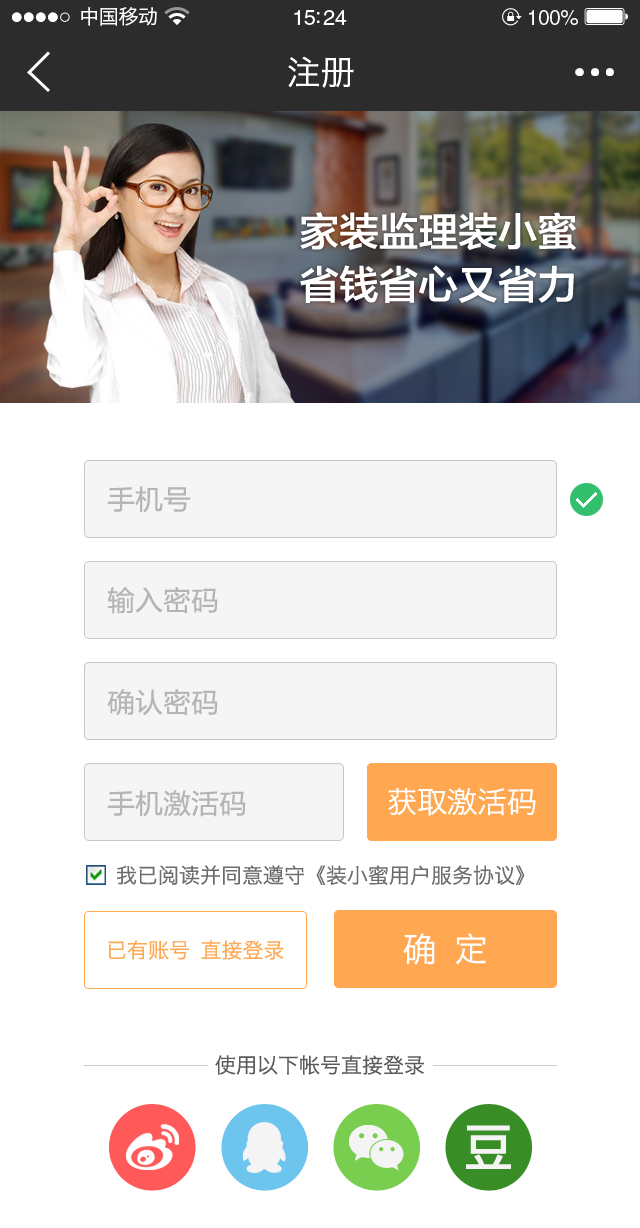
<style>
.page{position:relative;width:640px;height:1228px;background:#ffffff}
.page>*{position:absolute;margin:0}
.t1{font:20px "HiraginoSansGB-W3";letter-spacing:-0.02em;color:#ffffff}
.t2{font:21.5px "HelveticaLTStd-Roman";letter-spacing:-0.02em;color:#ffffff}
.t3{font:20.6px "HelveticaLTStd-Roman";letter-spacing:-0.02em;color:#ffffff}
.t4{font:34px "HiraginoSansGB-W3";color:#ffffff}
.t5{font:39.7px/52.9px "FZLTZHK--GBK1-0";color:#ffffff}
.t6{font:28px "FZLTHJW--GB1-0";color:#b5b5b5}
.t7{font:30px "HiraginoSansGB-W3";color:#ffffff}
.t8{font:21px "HiraginoSansGB-W3";color:#6c6c6c}
.t9{font:21px "HiraginoSansGB-W3";color:#ffa751}
.t10{font:21px "HiraginoSansGB-W3";color:#5b5b5b}
</style>
<div class="page">
<p class="t1" style="left:81px;top:7px;width:76px;height:19px">中国移动</p>
<p class="t2" style="left:294px;top:10px;width:53px;height:15px">15:24</p>
<p class="t3" style="left:529px;top:10px;width:49px;height:15px">100%</p>
<p class="t4" style="left:288px;top:56px;width:66px;height:32px">注册</p>
<p class="t5" style="left:300px;top:212px;width:277px;height:91px">家装监理装小蜜<br>省钱省心又省力</p>
<p class="t6" style="left:107px;top:486px;width:84px;height:27px">手机号</p>
<p class="t6" style="left:107px;top:587px;width:111px;height:27px">输入密码</p>
<p class="t6" style="left:107px;top:689px;width:111px;height:27px">确认密码</p>
<p class="t6" style="left:107px;top:790px;width:139px;height:27px">手机激活码</p>
<p class="t7" style="left:388px;top:788px;width:148px;height:28px">获取激活码</p>
<p class="t8" style="left:117px;top:865px;width:408px;height:20px">我已阅读并同意遵守《装小蜜用户服务协议》</p>
<p class="t9" style="left:108px;top:940px;width:176px;height:20px">已有账号 直接登录</p>
<p class="t4" style="left:403px;top:933px;width:83px;height:32px">确 定</p>
<p class="t10" style="left:215px;top:1055px;width:209px;height:20px">使用以下帐号直接登录</p>
</div>
